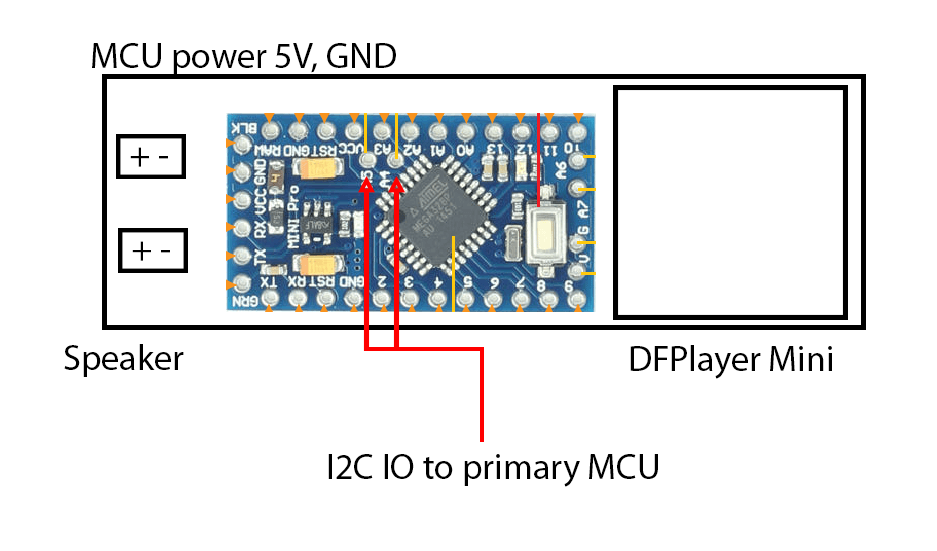
<style>
.page{position:relative;width:937px;height:551px;background:#ffffff}
.page>*{position:absolute;margin:0}
.t1{font:36px "MyriadPro-Regular";color:#000000}
</style>
<div class="page">
<p class="t1" style="left:92px;top:43px;width:304px;height:32px">MCU power 5V, GND</p>
<p class="t1" style="left:130px;top:147px;width:38px;height:20px">+ -</p>
<p class="t1" style="left:132px;top:241px;width:38px;height:20px">+ -</p>
<p class="t1" style="left:64px;top:344px;width:120px;height:33px">Speaker</p>
<p class="t1" style="left:630px;top:345px;width:202px;height:34px">DFPlayer Mini</p>
<p class="t1" style="left:328px;top:454px;width:330px;height:33px">I2C IO to primary MCU</p>
</div>
